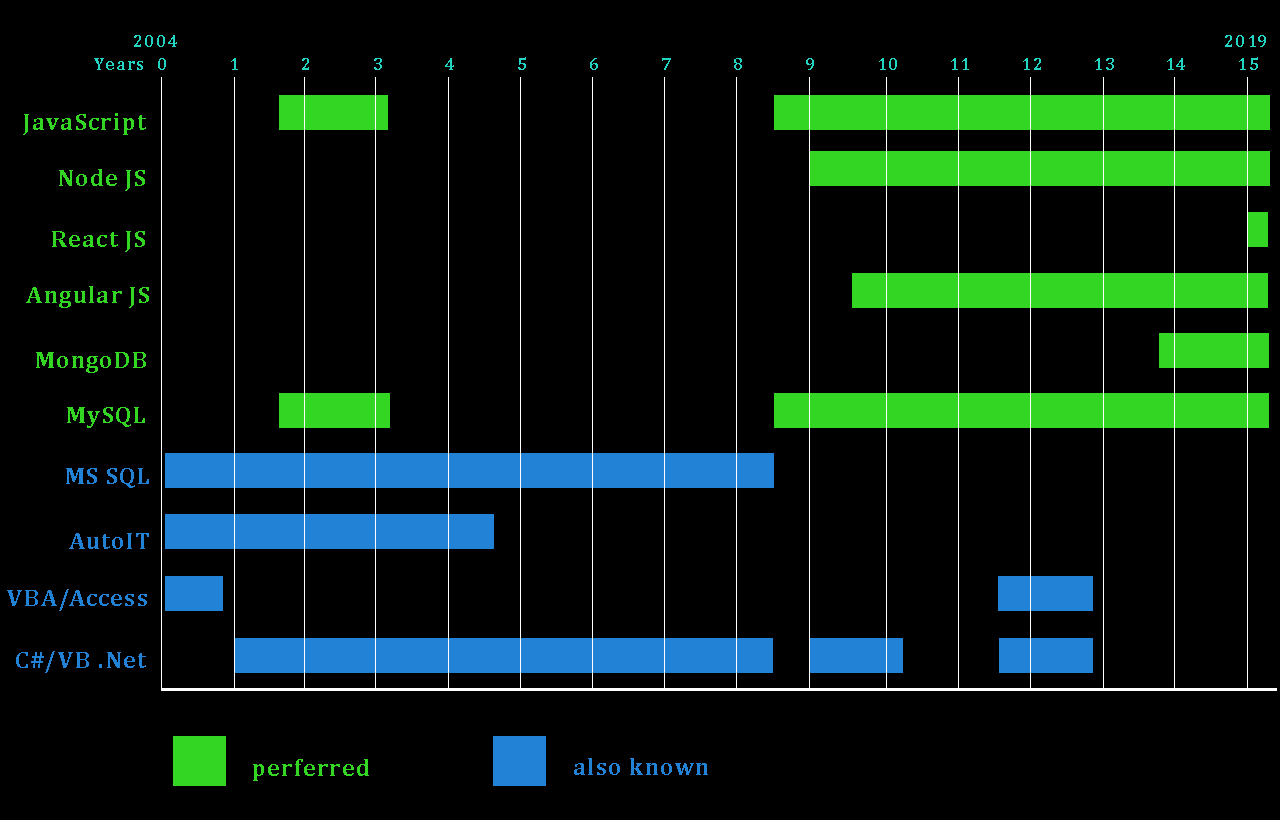
<style>
.page{position:relative;width:1280px;height:820px;background:#000000}
.page>*{position:absolute;margin:0}
.t1{font:18px "Cambria-Bold";letter-spacing:0.05em;color:#22d6c3}
.t2{font:24px "Cambria-Bold";letter-spacing:0.05em;color:#33d622}
.t3{font:24px "Cambria-Bold";letter-spacing:0.05em;color:#2283d6}
</style>
<div class="page">
<p class="t1" style="left:134px;top:35px;width:43px;height:12px">2004</p>
<p class="t1" style="left:1225px;top:35px;width:41px;height:12px">2019</p>
<p class="t1" style="left:94px;top:58px;width:49px;height:12px">Years</p>
<p class="t1" style="left:158px;top:57px;width:1100px;height:13px">0  1  2  3  4  5  6  7  8  9  10  11  12  13  14  15</p>
<p class="t2" style="left:23px;top:113px;width:123px;height:22px">JavaScript</p>
<p class="t2" style="left:59px;top:169px;width:86px;height:22px">Node JS</p>
<p class="t2" style="left:52px;top:231px;width:93px;height:21px">React JS</p>
<p class="t2" style="left:26px;top:286px;width:123px;height:22px">Angular JS</p>
<p class="t2" style="left:36px;top:352px;width:110px;height:21px">MongoDB</p>
<p class="t2" style="left:67px;top:407px;width:78px;height:21px">MySQL</p>
<p class="t3" style="left:66px;top:468px;width:83px;height:20px">MS SQL</p>
<p class="t3" style="left:69px;top:533px;width:80px;height:16px">AutoIT</p>
<p class="t3" style="left:7px;top:589px;width:140px;height:22px">VBA/Access</p>
<p class="t3" style="left:16px;top:651px;width:130px;height:22px">C#/VB .Net</p>
<p class="t2" style="left:253px;top:759px;width:116px;height:22px">perferred</p>
<p class="t3" style="left:574px;top:758px;width:134px;height:17px">also known</p>
</div>
